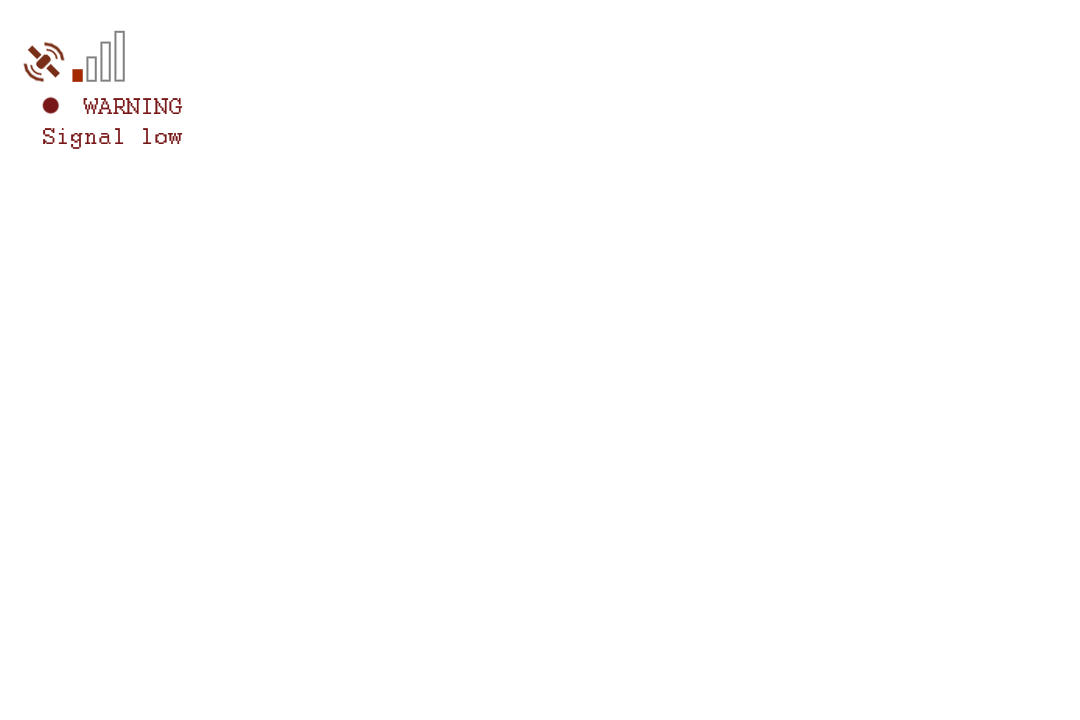
<style>
.page{position:relative;width:1080px;height:720px;background:#ffffff}
.page>*{position:absolute;margin:0}
.t1{font:25px "Courier";color:#781717}
</style>
<div class="page">
<p class="t1" style="left:43px;top:98px;width:140px;height:51px;text-align:right">WARNING<br>Signal low</p>
</div>
